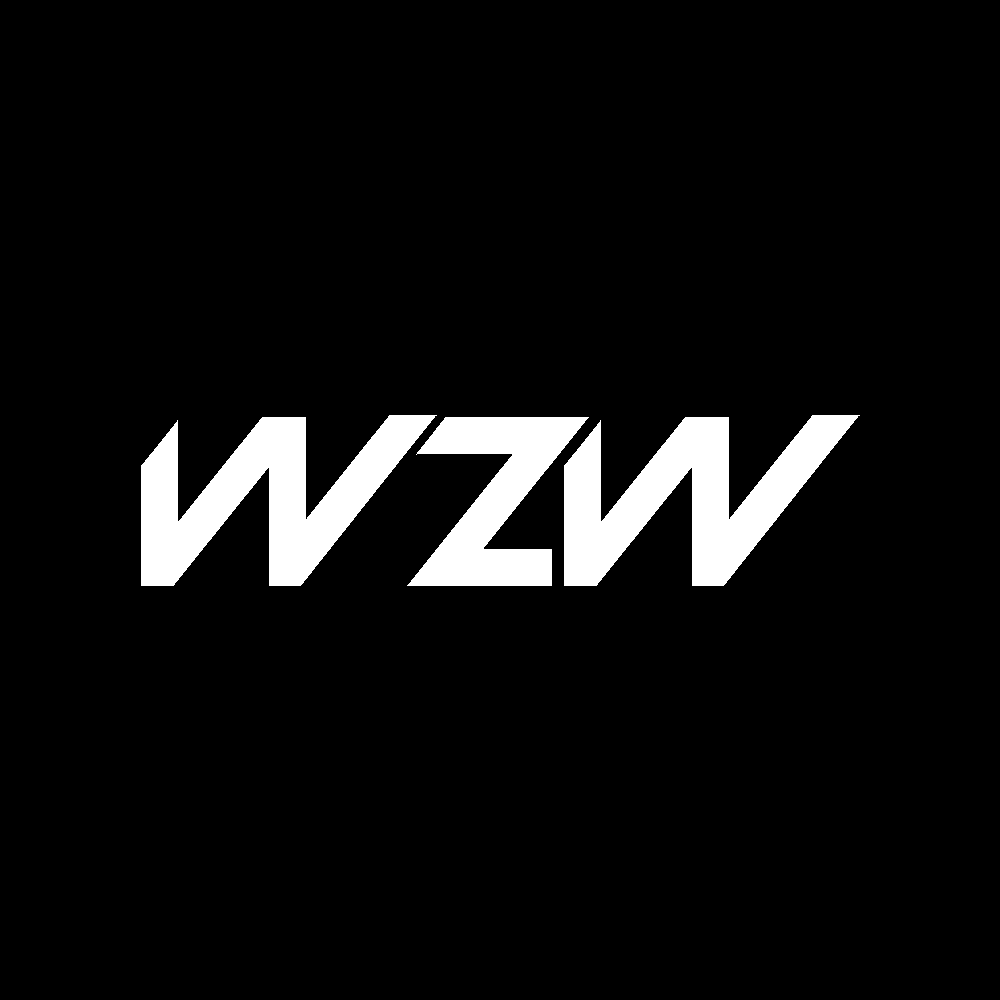
<style>
.page{position:relative;width:1000px;height:1000px;background:#000000}
.page>*{position:absolute;margin:0}
.t1{font:246.1px "Anniversary-Regular";color:#ffffff}
</style>
<div class="page">
<p class="t1" style="left:141px;top:415px;width:719px;height:171px">WZW</p>
</div>
